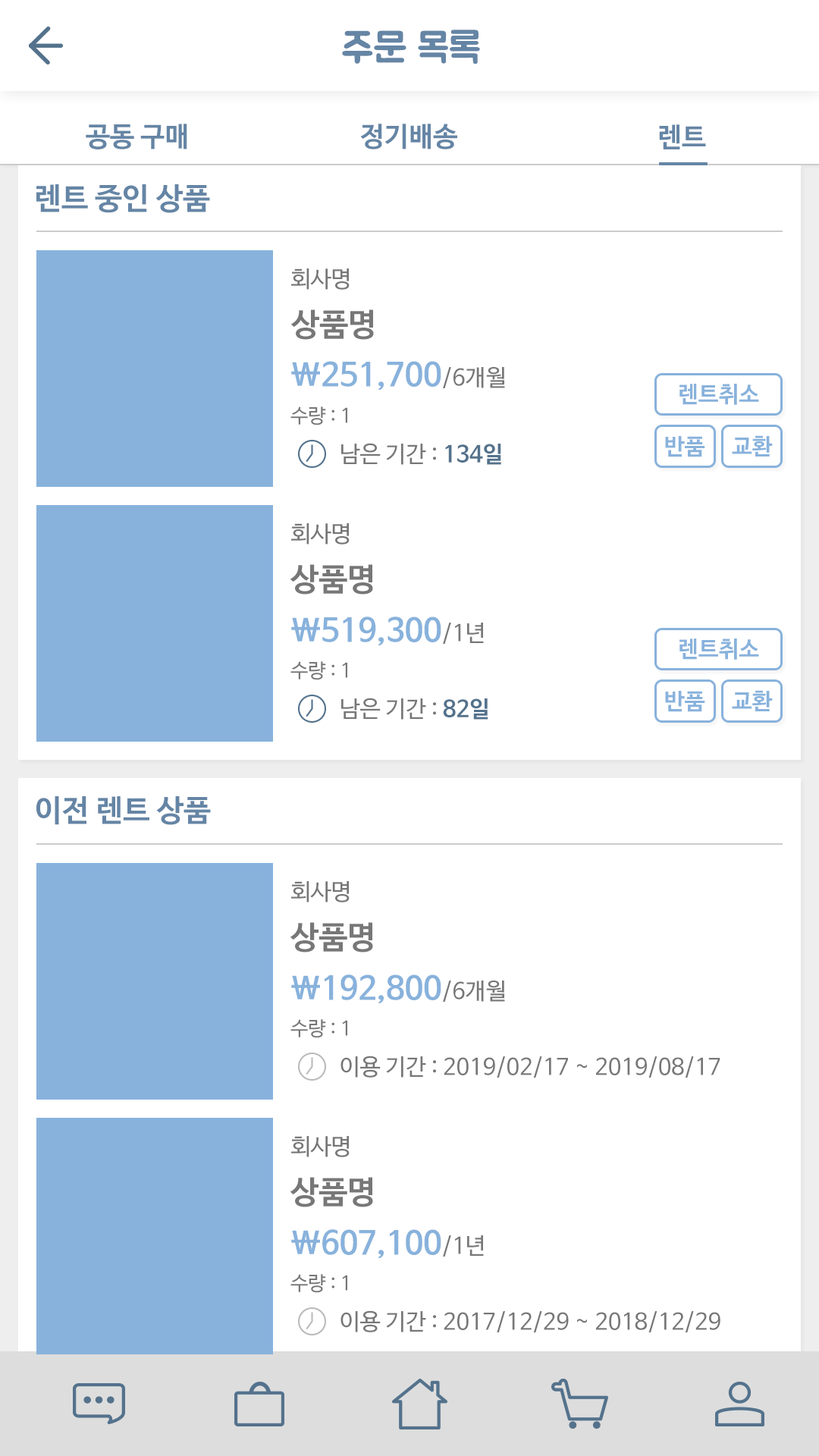
<style>
.page{position:relative;width:819px;height:1456px;background:#ffffff}
.page>*{position:absolute;margin:0}
.t1{font:40.9px "BMJUA";color:#6585a5}
.t2{font:27.3px "NanumBarunGothicBold";color:#6585a5}
.t3{font:30.3px "NanumBarunGothicBold";color:#6585a5}
.t4{font:22.7px "NanumBarunGothic";color:#777777}
.t5{font:31.8px "NanumBarunGothicBold";color:#777777}
.t6{font:31.8px "NanumBarunGothicBold";color:#88b2dc}
.t7{font:22.7px "NanumBarunGothicBold";color:#88b2dc}
.t8{font:19.7px "NanumBarunGothic";color:#777777}
.t9{font:22.7px "NanumBarunGothicBold";color:#54728c}
</style>
<div class="page">
<p class="t1" style="left:342px;top:30px;width:138px;height:34px">주문 목록</p>
<p class="t2" style="left:86px;top:124px;width:101px;height:25px">공동 구매</p>
<p class="t2" style="left:360px;top:124px;width:97px;height:25px">정기배송</p>
<p class="t2" style="left:659px;top:124px;width:47px;height:25px">렌트</p>
<p class="t3" style="left:36px;top:184px;width:174px;height:29px">렌트 중인 상품</p>
<p class="t4" style="left:291px;top:268px;width:59px;height:22px">회사명</p>
<p class="t5" style="left:290px;top:309px;width:84px;height:31px">상품명</p>
<p class="t6" style="left:291px;top:361px;width:214px;height:30px">\251,700<span class="t4">/6개월</span></p>
<p class="t7" style="left:679px;top:384px;width:80px;height:21px">렌트취소</p>
<p class="t8" style="left:290px;top:406px;width:57px;height:19px">수량 : 1</p>
<p class="t7" style="left:665px;top:436px;width:40px;height:21px">반품</p>
<p class="t7" style="left:732px;top:435px;width:41px;height:22px">교환</p>
<p class="t4" style="left:341px;top:443px;width:160px;height:22px">남은 기간 : <span class="t9">134일</span></p>
<p class="t4" style="left:291px;top:523px;width:59px;height:21px">회사명</p>
<p class="t5" style="left:290px;top:564px;width:83px;height:31px">상품명</p>
<p class="t6" style="left:291px;top:617px;width:193px;height:29px">\519,300<span class="t4">/1년</span></p>
<p class="t7" style="left:679px;top:639px;width:80px;height:21px">렌트취소</p>
<p class="t8" style="left:290px;top:661px;width:57px;height:19px">수량 : 1</p>
<p class="t4" style="left:341px;top:698px;width:147px;height:22px">남은 기간 : <span class="t9">82일</span></p>
<p class="t7" style="left:665px;top:691px;width:40px;height:21px">반품</p>
<p class="t7" style="left:732px;top:690px;width:41px;height:21px">교환</p>
<p class="t3" style="left:36px;top:796px;width:175px;height:29px">이전 렌트 상품</p>
<p class="t4" style="left:291px;top:881px;width:59px;height:21px">회사명</p>
<p class="t5" style="left:290px;top:922px;width:83px;height:30px">상품명</p>
<p class="t6" style="left:291px;top:974px;width:214px;height:30px">\192,800<span class="t4">/6개월</span></p>
<p class="t8" style="left:290px;top:1019px;width:57px;height:19px">수량 : 1</p>
<p class="t4" style="left:340px;top:1056px;width:380px;height:22px">이용 기간 : 2019/02/17 ~ 2019/08/17</p>
<p class="t4" style="left:291px;top:1136px;width:59px;height:21px">회사명</p>
<p class="t5" style="left:290px;top:1177px;width:83px;height:30px">상품명</p>
<p class="t6" style="left:291px;top:1229px;width:193px;height:30px">\607,100<span class="t4">/1년</span></p>
<p class="t8" style="left:290px;top:1274px;width:57px;height:19px">수량 : 1</p>
<p class="t4" style="left:340px;top:1310px;width:380px;height:22px">이용 기간 : 2017/12/29 ~ 2018/12/29</p>
</div>
